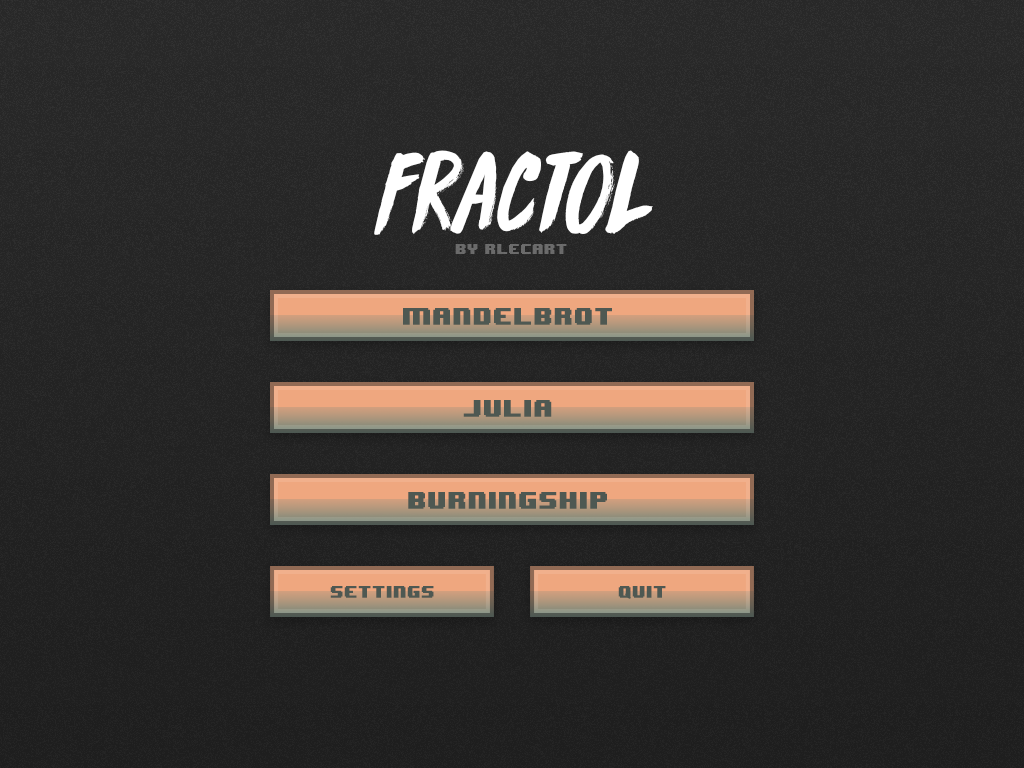
<style>
.page{position:relative;width:1024px;height:768px}
.page>*{position:absolute;margin:0}
.t1{font:114.8px "DKKnucklebones-Regular";color:#ffffff}
.t2{font:11.8px "8BITWONDERNominal";color:#696969}
.t3{font:20.2px "8BITWONDERNominal";color:#4e5852}
.t4{font:14px "8BITWONDERNominal";color:#4e5852}
</style>
<div class="page">
<p class="t1" style="left:374px;top:150px;width:279px;height:85px">Fractol</p>
<p class="t2" style="left:455px;top:244px;width:112px;height:10px">by rlecart</p>
<p class="t3" style="left:403px;top:308px;width:209px;height:17px">mandelbrot</p>
<p class="t3" style="left:463px;top:400px;width:89px;height:17px">julia</p>
<p class="t3" style="left:408px;top:492px;width:199px;height:17px">Burningship</p>
<p class="t4" style="left:330px;top:586px;width:104px;height:12px">settings</p>
<p class="t4" style="left:618px;top:586px;width:48px;height:12px">quit</p>
</div>
